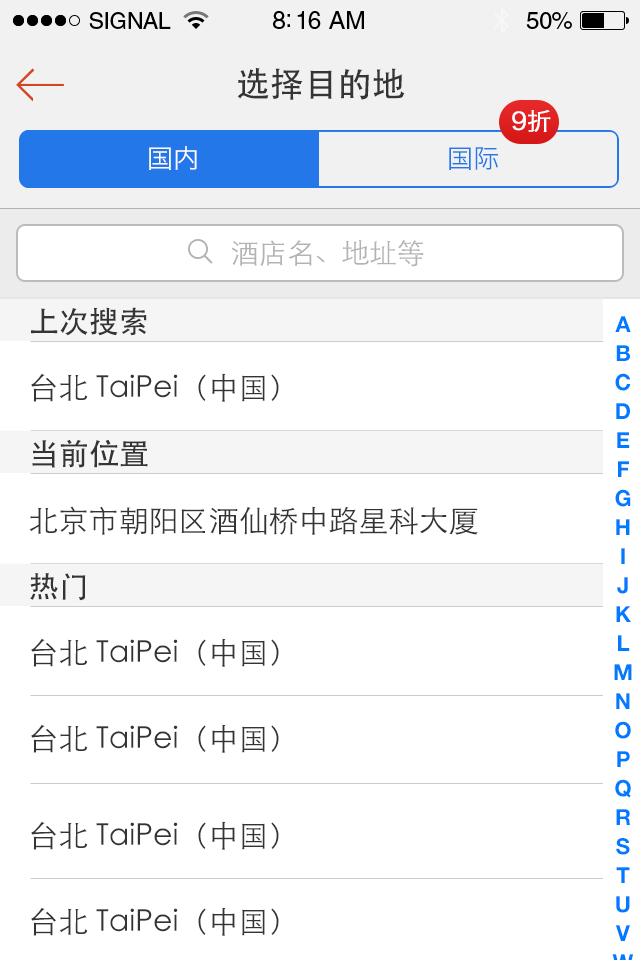
<style>
.page{position:relative;width:640px;height:960px;background:#ffffff}
.page>*{position:absolute;margin:0}
.t1{font:34px "STHeitiSC-Medium";color:#343434}
.t2{font:24px "HiraginoSansGB-W3";letter-spacing:-0.03em;color:#ffffff;font-weight:bold}
.t3{font:26px "HiraginoSansGB-W3";color:#ffffff}
.t4{font:26px "HiraginoSansGB-W3";color:#2377e8}
.t5{font:28px "STHeitiSC-Light";letter-spacing:-0.01em;color:#b3b3b3}
.t6{font:30px "STHeitiSC-Medium";color:#343434}
.t7{font:30px "STHeitiSC-Light";color:#343434}
</style>
<div class="page">
<p class="t1" style="left:237px;top:68px;width:168px;height:32px">选择目的地</p>
<p class="t2" style="left:512px;top:110px;width:39px;height:22px">9折</p>
<p class="t3" style="left:149px;top:146px;width:48px;height:24px">国内</p>
<p class="t4" style="left:449px;top:147px;width:49px;height:23px">国际</p>
<p class="t5" style="left:231px;top:240px;width:193px;height:27px">酒店名、地址等</p>
<p class="t6" style="left:31px;top:307px;width:116px;height:29px">上次搜索</p>
<p class="t7" style="left:31px;top:373px;width:248px;height:29px">台北 TaiPei（中国）</p>
<p class="t6" style="left:32px;top:439px;width:116px;height:29px">当前位置</p>
<p class="t7" style="left:29px;top:506px;width:449px;height:29px">北京市朝阳区酒仙桥中路星科大厦</p>
<p class="t6" style="left:30px;top:573px;width:56px;height:28px">热门</p>
<p class="t7" style="left:31px;top:638px;width:248px;height:29px">台北 TaiPei（中国）</p>
<p class="t7" style="left:31px;top:724px;width:248px;height:29px">台北 TaiPei（中国）</p>
<p class="t7" style="left:31px;top:821px;width:248px;height:29px">台北 TaiPei（中国）</p>
<p class="t7" style="left:31px;top:907px;width:248px;height:29px">台北 TaiPei（中国）</p>
</div>
